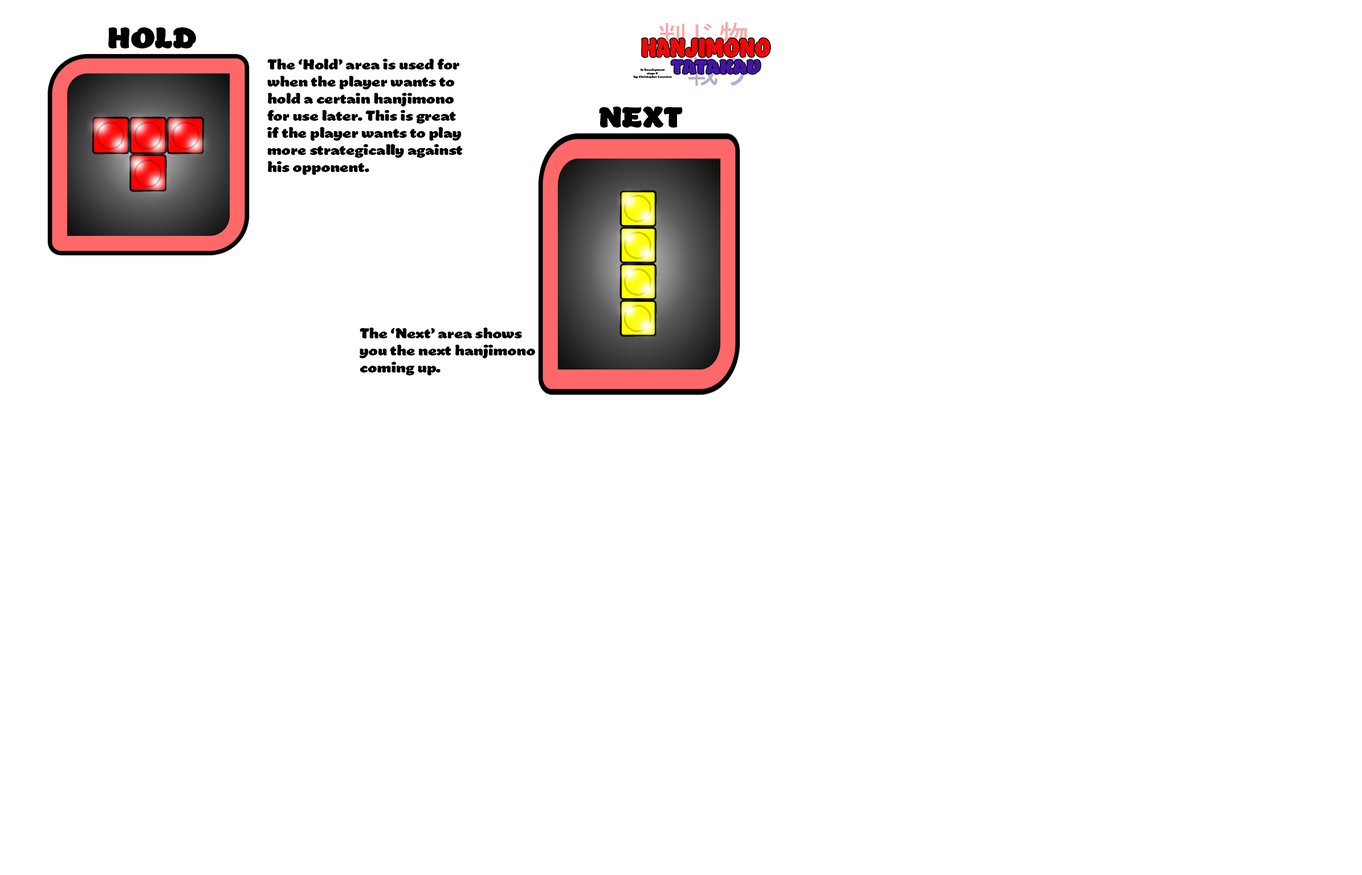
<style>
.page{position:relative;width:1362px;height:875px;background:#ffffff}
.page>*{position:absolute;margin:0}
.t1{font:13.8px "Manteiga-Gorda";color:#000000}
.t2{font:6.8px "Manteiga-Gorda";color:#000000}
</style>
<div class="page">
<p class="t1" style="left:108px;top:27px;width:88px;height:21px">HOLD</p>
<p class="t2" style="left:267px;top:59px;width:196px;height:116px">The ‘Hold’ area is used for <br>when the player wants to<br>hold a certain hanjimono<br>for use later. This is great<br>if the player wants to play<br>more strategically against<br>his opponent.</p>
<p class="t1" style="left:599px;top:107px;width:84px;height:21px">NEXT</p>
<p class="t2" style="left:360px;top:328px;width:175px;height:48px">The ‘Next’ area shows<br>you the next hanjimono<br>coming up.</p>
</div>
